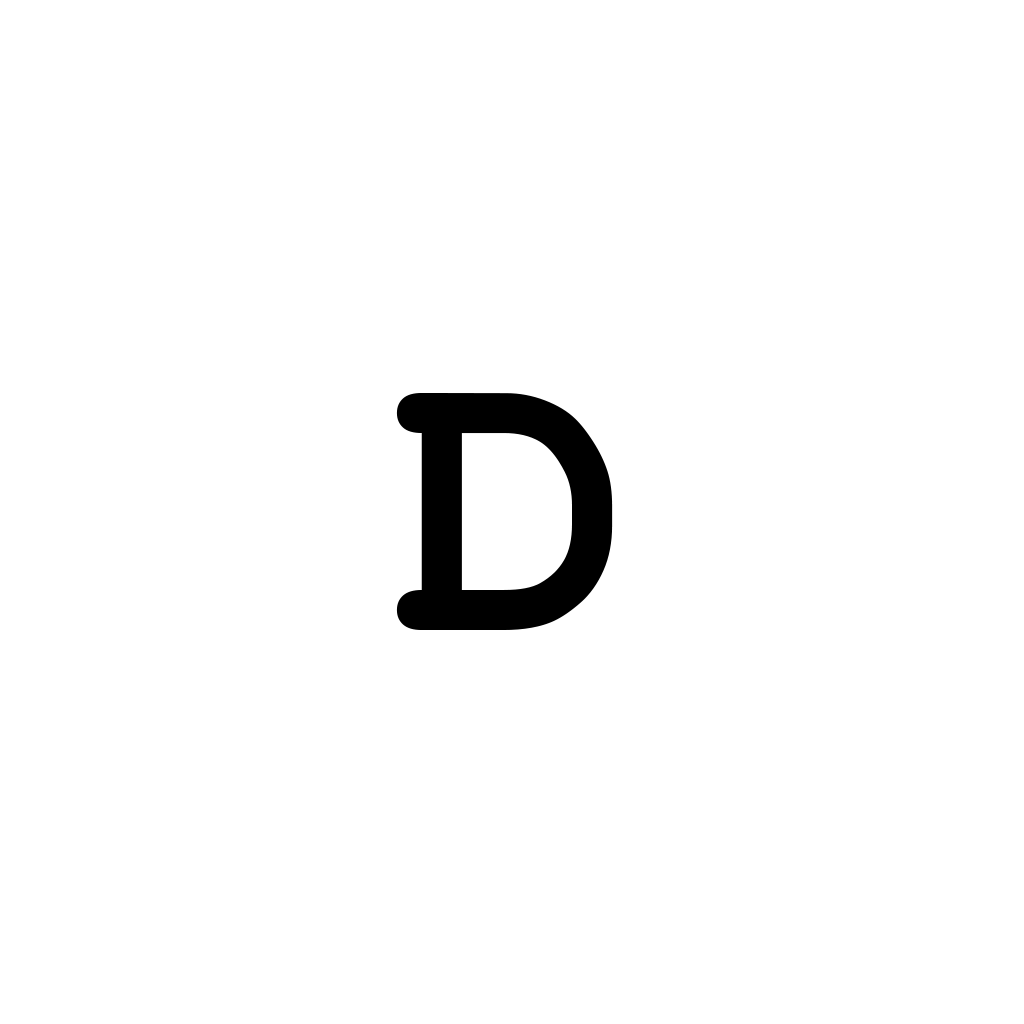
<style>
.page{position:relative;width:1024px;height:1024px;background:#ffffff}
.page>*{position:absolute;margin:0}
.t1{font:400px "CourierNewPS-BoldMT";color:#000000}
</style>
<div class="page">
<p class="t1" style="left:396px;top:393px;width:217px;height:237px">D</p>
</div>
